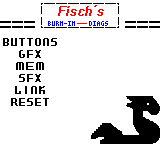
<style>
.page{position:relative;width:160px;height:144px;background:#ffffff}
.page>*{position:absolute;margin:0}
.t1{font:12px "Quartz-Regular";color:#000000;text-transform:uppercase;font-weight:bold;scale:1.25 1}
.t2{font:12px "Quartz-Regular";color:#000000;text-transform:uppercase;font-weight:bold;scale:1.5 1}
</style>
<div class="page">
<p class="t1" style="left:3px;top:38px;width:54px;height:8px">buttons</p>
<p class="t1" style="left:19px;top:50px;width:22px;height:8px">gfx</p>
<p class="t2" style="left:16px;top:62px;width:28px;height:8px">mem</p>
<p class="t1" style="left:19px;top:74px;width:22px;height:8px">sfx</p>
<p class="t1" style="left:15px;top:86px;width:30px;height:8px">link</p>
<p class="t1" style="left:11px;top:98px;width:38px;height:8px">reset</p>
</div>
